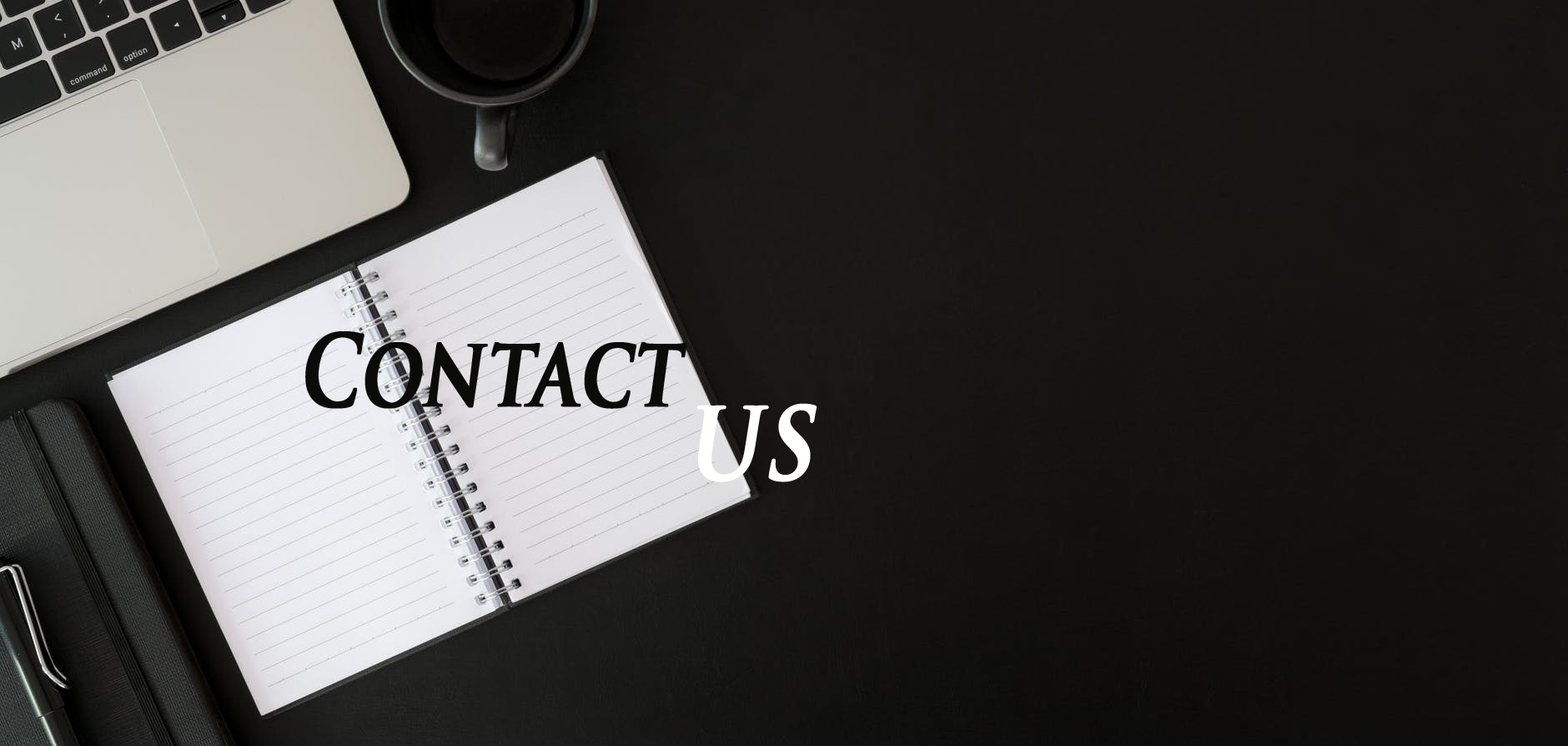
<style>
.page{position:relative;width:1568px;height:746px}
.page>*{position:absolute;margin:0}
.t1{font:96.8px "TrajanPro-Bold";color:#0b0b0a;font-weight:bold;font-style:italic;scale:0.76 1}
.t2{font:96.7px "TrajanPro-Bold";color:#fffffe;font-weight:bold;font-style:italic;scale:0.9 1}
</style>
<div class="page">
<p class="t1" style="left:305px;top:331px;width:382px;height:78px">Contact</p>
<p class="t2" style="left:696px;top:403px;width:121px;height:79px">US</p>
</div>
